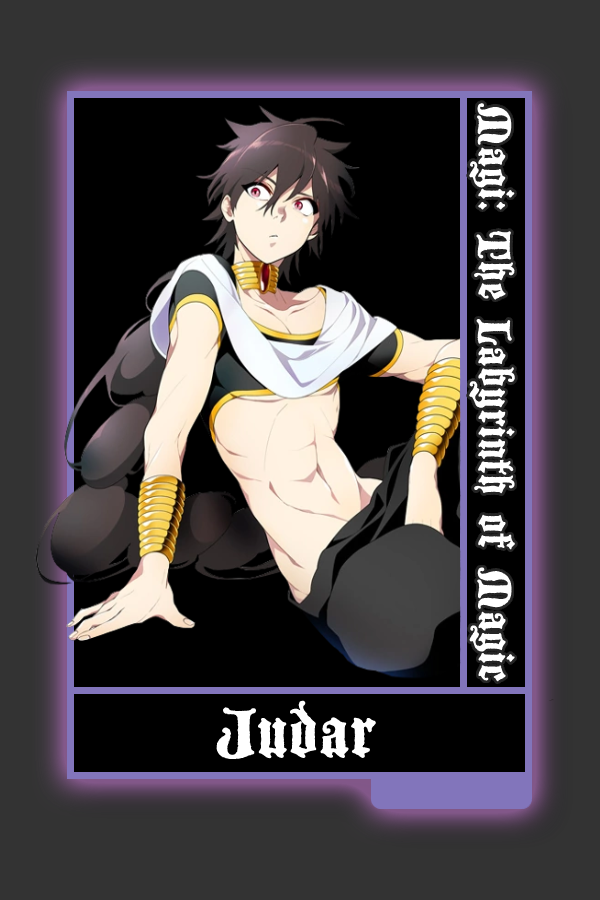
<style>
.page{position:relative;width:600px;height:900px;background:#000000}
.page>*{position:absolute;margin:0}
.t1{font:50px "BlackwoodCastle";color:#ffffff}
.t2{font:75px "BlackwoodCastle";color:#ffffff}
</style>
<div class="page">
<p class="t1" style="left:469px;top:103px;width:46px;height:579px;rotate:90deg">Magi: The Labyrinth of Magic</p>
<p class="t2" style="left:216px;top:700px;width:160px;height:60px">Judar</p>
</div>
